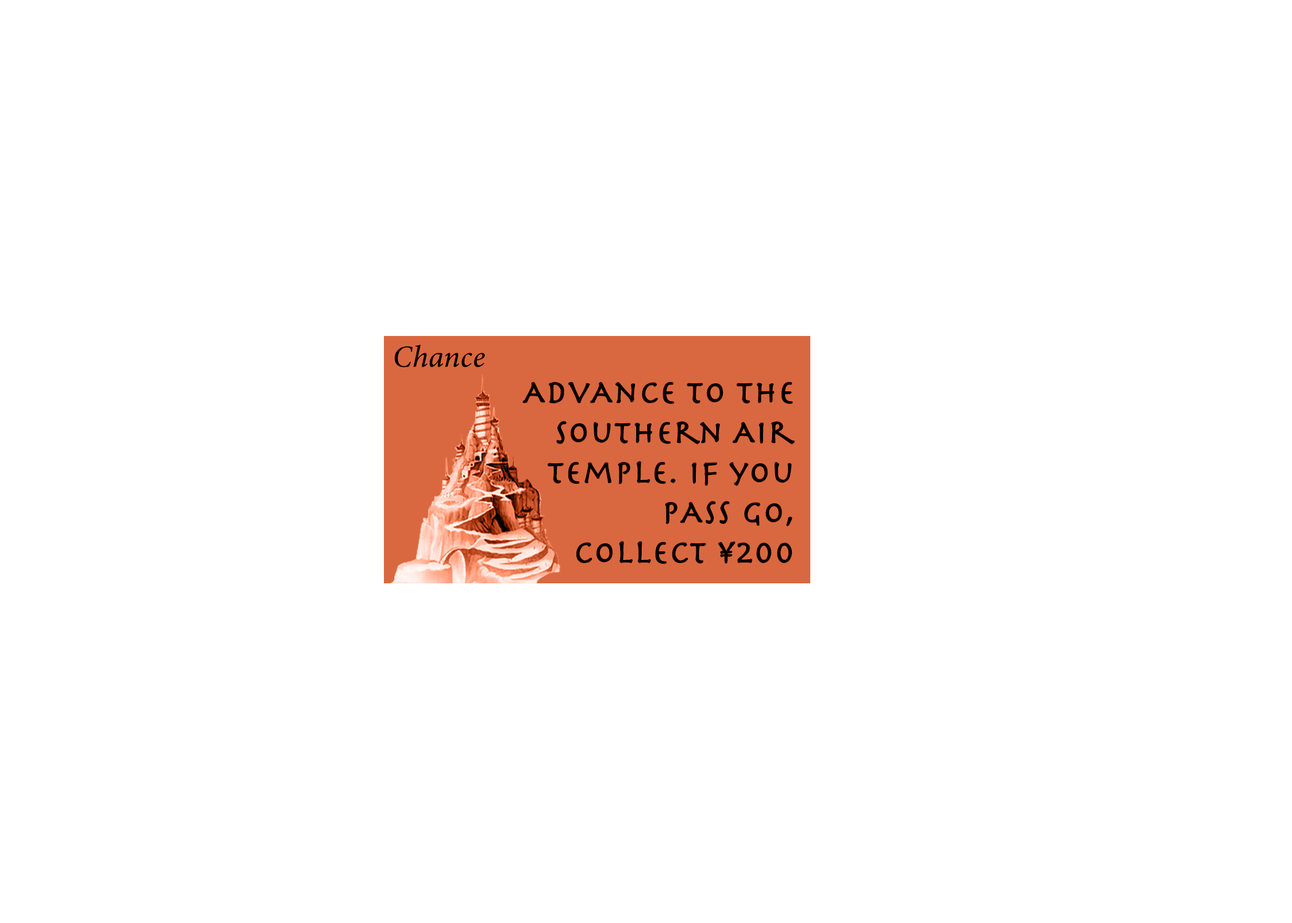
<style>
.page{position:relative;width:1292px;height:923px;background:#ffffff}
.page>*{position:absolute;margin:0}
.t1{font:30.8px "MinionConceptItalic-MediumItalic";color:#000000;font-weight:bold}
.t2{font:33.3px "Herculanum";color:#000000;font-weight:bold}
</style>
<div class="page">
<p class="t1" style="left:394px;top:345px;width:91px;height:22px">Chance</p>
<p class="t2" style="left:522px;top:381px;width:273px;height:183px;text-align:right">AdvAnce to the<br>southern Air<br>Temple. if you<br>pAss go,<br>collect ¥200</p>
</div>
